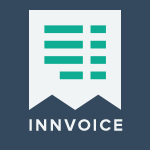
<style>
.page{position:relative;width:150px;height:150px;background:#34495e}
.page>*{position:absolute;margin:0}
.t1{font:17px "ProximaNova-Bold";letter-spacing:0.12em;color:#f1f4f5}
</style>
<div class="page">
<p class="t1" style="left:29px;top:119px;width:94px;height:12px">INNVOICE</p>
</div>
